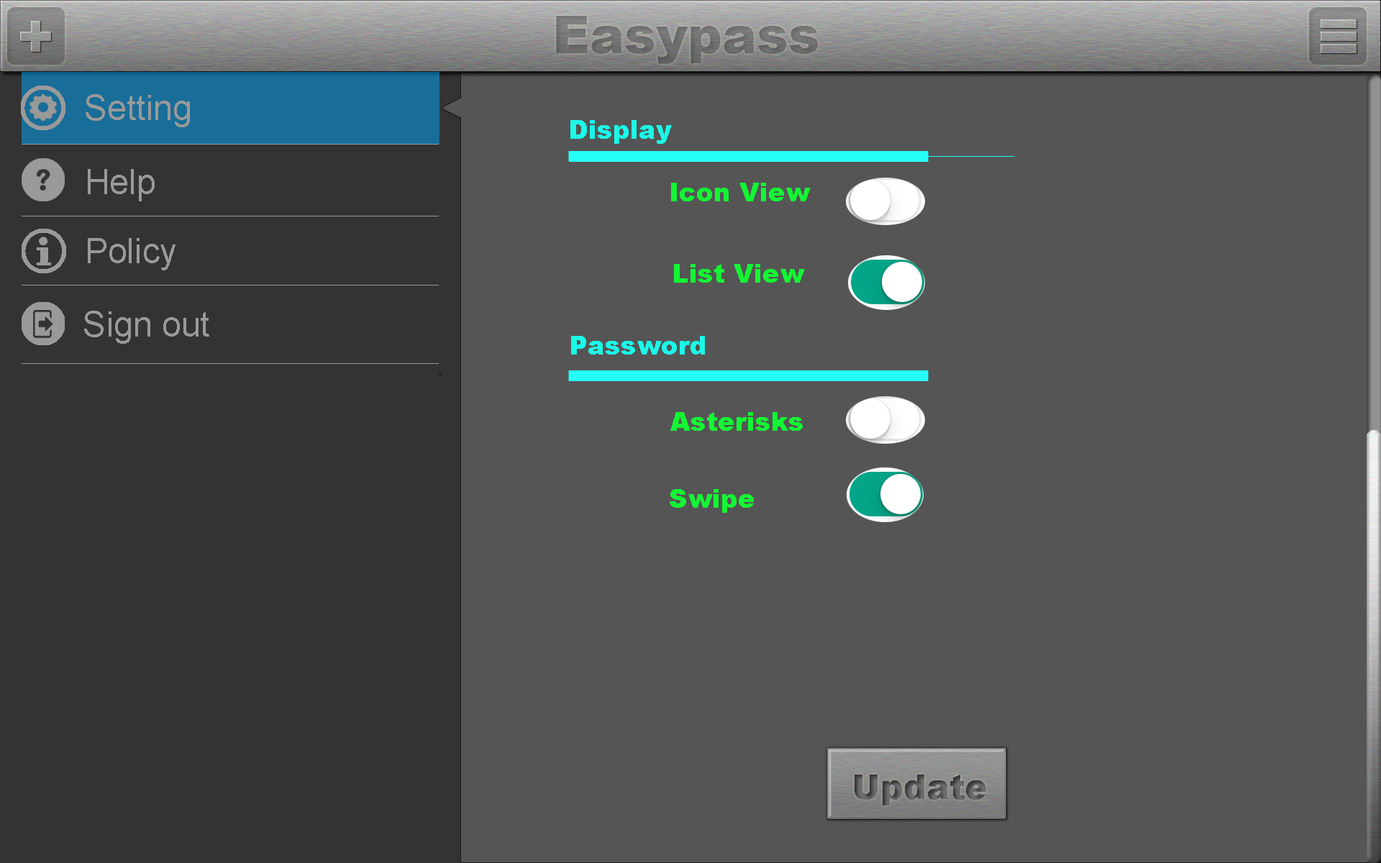
<style>
.page{position:relative;width:1381px;height:863px;background:#555555}
.page>*{position:absolute;margin:0}
.t1{font:34.5px "ArialMT";color:#999999}
.t2{font:25.9px "Arial-Black";color:#1bfae8}
.t3{font:25.9px "Arial-Black";color:#14f634}
</style>
<div class="page">
<p class="t1" style="left:86px;top:94px;width:104px;height:33px">Setting</p>
<p class="t2" style="left:570px;top:120px;width:102px;height:24px">Display</p>
<p class="t1" style="left:88px;top:169px;width:67px;height:32px">Help</p>
<p class="t3" style="left:671px;top:183px;width:140px;height:18px">Icon View</p>
<p class="t1" style="left:88px;top:238px;width:88px;height:32px">Policy</p>
<p class="t3" style="left:674px;top:264px;width:131px;height:19px">List View</p>
<p class="t1" style="left:84px;top:311px;width:125px;height:33px">Sign out</p>
<p class="t2" style="left:571px;top:336px;width:134px;height:19px">Password</p>
<p class="t3" style="left:670px;top:412px;width:133px;height:19px">Asterisks</p>
<p class="t3" style="left:670px;top:489px;width:84px;height:24px">Swipe</p>
</div>
